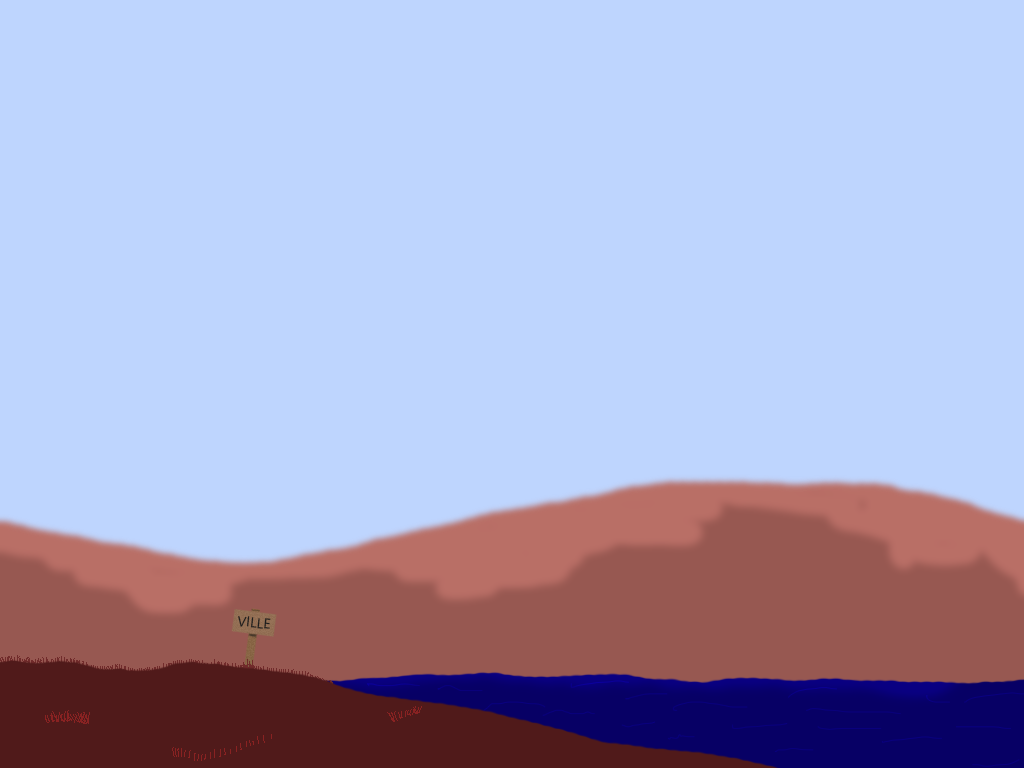
<style>
.page{position:relative;width:1024px;height:768px;background:#bed5fe}
.page>*{position:absolute;margin:0}
.t1{font:14px "SegoeUI";letter-spacing:0.01em;color:#1e1e1e;text-transform:uppercase}
</style>
<div class="page">
<p class="t1" style="left:238px;top:616px;width:33px;height:13px;rotate:6deg">VILLE</p>
</div>
